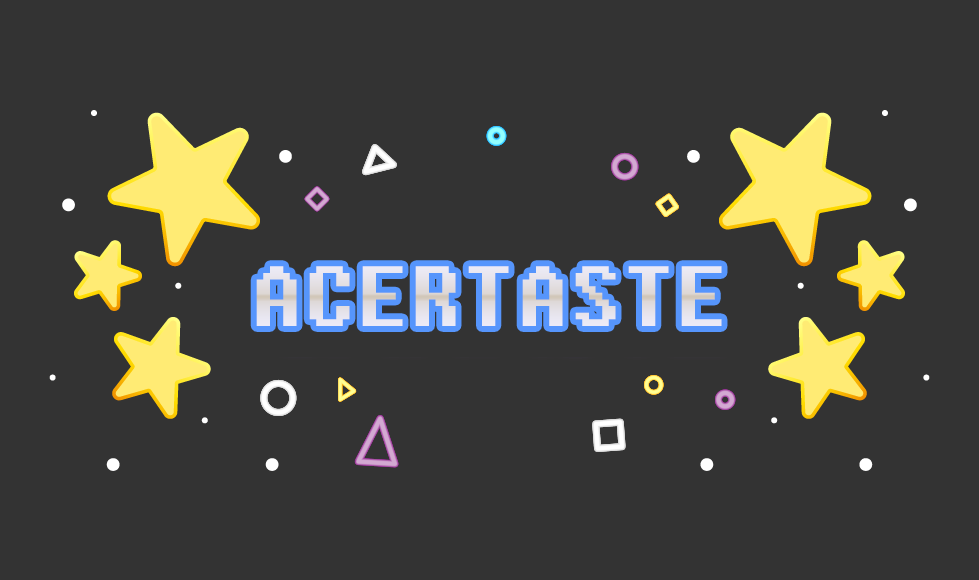
<style>
.page{position:relative;width:979px;height:580px;background:#333333}
.page>*{position:absolute;margin:0}
.t1{font:85px "Fixedsys";color:#e6e4f3}
</style>
<div class="page">
<p class="t1" style="left:256px;top:266px;width:466px;height:60px">ACERTASTE</p>
</div>
